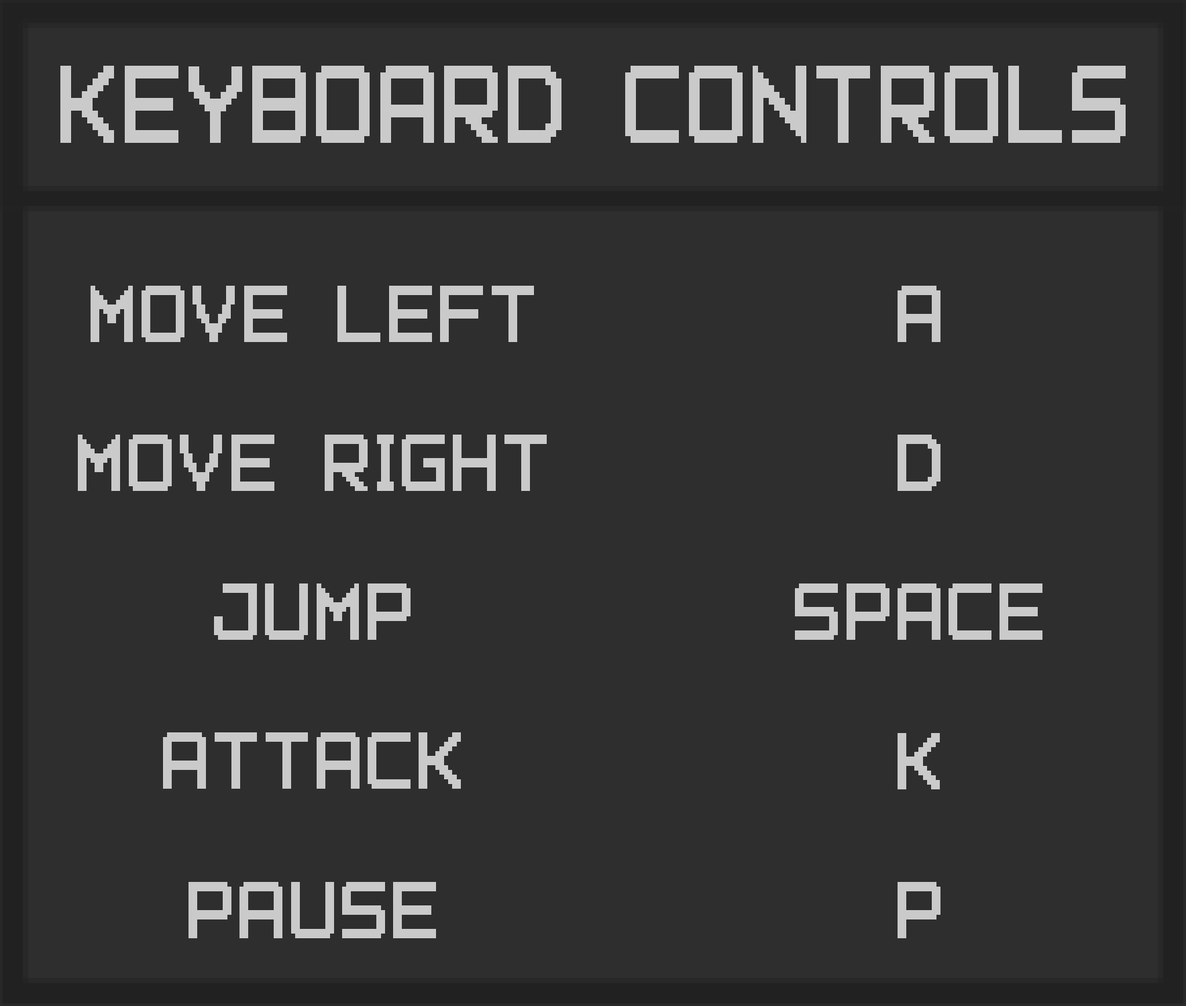
<style>
.page{position:relative;width:1186px;height:1006px;background:#2e2e2e}
.page>*{position:absolute;margin:0}
.t1{font:127.7px "PixelFont-7";color:#cacaca;scale:0.83 1}
.t2{font:93.7px/149px "PixelFont-7";color:#cacaca;scale:0.91 1}
</style>
<div class="page">
<p class="t1" style="left:60px;top:66px;width:1065px;height:77px">KEYBOARD CONTROLS</p>
<p class="t2" style="left:78px;top:286px;width:468px;height:652px;text-align:center">MOVE LEFT<br>MOVE RIGHT<br>JUMP<br>ATTACK<br>PAUSE</p>
<p class="t2" style="left:795px;top:286px;width:247px;height:652px;text-align:center">A<br>D<br>SPACE<br>K<br>P</p>
</div>
